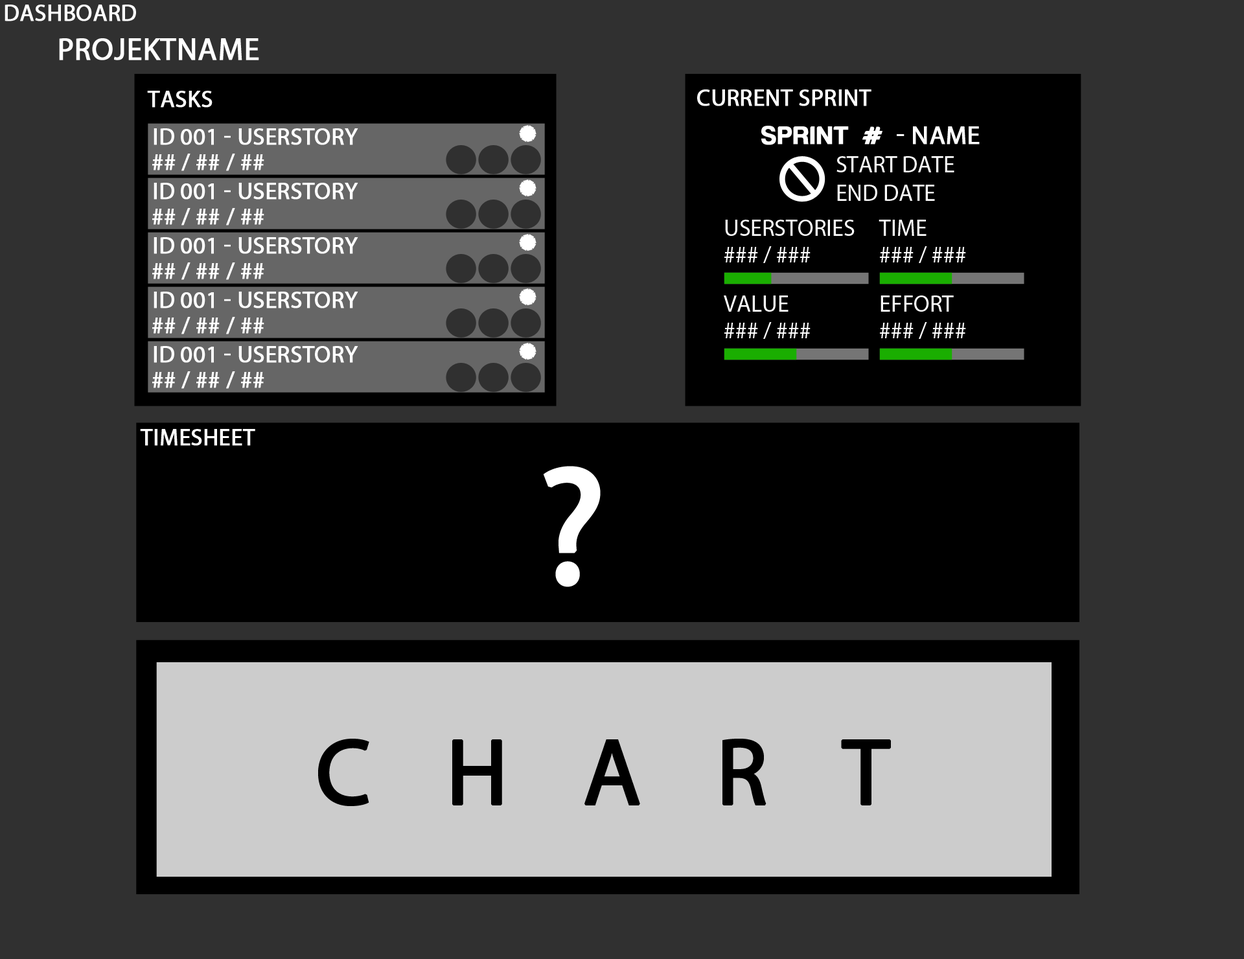
<style>
.page{position:relative;width:1244px;height:959px;background:#303030}
.page>*{position:absolute;margin:0}
.t1{font:23.3px "MyriadPro-Regular";color:#ffffff;text-transform:uppercase;font-weight:bold}
.t2{font:31.1px "MyriadPro-Regular";color:#ffffff;text-transform:uppercase;font-weight:bold}
.t3{font:25.9px "HarabaraMaisBold-HarabaraMaisBold";color:#ffffff;text-transform:uppercase;font-weight:bold}
.t4{font:25.9px "MyriadPro-Regular";color:#ffffff;text-transform:uppercase;font-weight:bold}
.t5{font:23.3px/21.2px "MyriadPro-Regular";color:#ffffff;text-transform:uppercase}
.t6{font:23.3px "MyriadPro-Regular";color:#ffffff;text-transform:uppercase}
.t7{font:166.5px "MyriadPro-Regular";color:#ffffff;text-transform:uppercase;font-weight:bold}
.t8{font:93.9px "MyriadPro-Regular";letter-spacing:0.78em;color:#000000;text-transform:uppercase;font-weight:bold}
</style>
<div class="page">
<p class="t1" style="left:5px;top:5px;width:131px;height:16px">Dashboard</p>
<p class="t2" style="left:59px;top:38px;width:200px;height:22px">ProjektName</p>
<p class="t1" style="left:697px;top:89px;width:174px;height:17px">Current Sprint</p>
<p class="t1" style="left:147px;top:91px;width:65px;height:17px">Tasks</p>
<p class="t3" style="left:761px;top:126px;width:218px;height:19px">Sprint # <span class="t4">- Name</span></p>
<p class="t1" style="left:154px;top:128px;width:204px;height:17px">ID 001 - USERStory</p>
<p class="t1" style="left:152px;top:154px;width:112px;height:17px">## / ## / ##</p>
<p class="t5" style="left:836px;top:156px;width:118px;height:45px">start Date<br>End Date</p>
<p class="t1" style="left:154px;top:183px;width:204px;height:17px">ID 001 - USERStory</p>
<p class="t1" style="left:152px;top:208px;width:112px;height:17px">## / ## / ##</p>
<p class="t6" style="left:725px;top:220px;width:129px;height:16px">UserStories</p>
<p class="t6" style="left:878px;top:220px;width:48px;height:16px">time</p>
<p class="t1" style="left:154px;top:237px;width:204px;height:17px">ID 001 - USERStory</p>
<p class="t6" style="left:724px;top:246px;width:86px;height:17px">### / ###</p>
<p class="t6" style="left:880px;top:246px;width:86px;height:17px">### / ###</p>
<p class="t1" style="left:152px;top:262px;width:112px;height:18px">## / ## / ##</p>
<p class="t1" style="left:154px;top:292px;width:204px;height:16px">ID 001 - USERStory</p>
<p class="t6" style="left:724px;top:295px;width:64px;height:17px">Value</p>
<p class="t6" style="left:880px;top:295px;width:74px;height:17px">Effort</p>
<p class="t1" style="left:152px;top:317px;width:112px;height:17px">## / ## / ##</p>
<p class="t6" style="left:724px;top:322px;width:86px;height:17px">### / ###</p>
<p class="t6" style="left:880px;top:322px;width:86px;height:17px">### / ###</p>
<p class="t1" style="left:154px;top:346px;width:204px;height:17px">ID 001 - USERStory</p>
<p class="t1" style="left:152px;top:371px;width:112px;height:18px">## / ## / ##</p>
<p class="t1" style="left:140px;top:429px;width:115px;height:17px">Timesheet</p>
<p class="t7" style="left:543px;top:466px;width:58px;height:121px">?</p>
<p class="t8" style="left:318px;top:738px;width:573px;height:68px">CHART</p>
</div>
